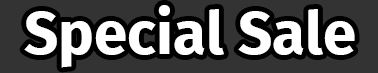
<style>
.page{position:relative;width:378px;height:73px;background:#333333}
.page>*{position:absolute;margin:0}
.t1{font:60px "FiraSans-Bold";color:#ffffff}
</style>
<div class="page">
<p class="t1" style="left:24px;top:5px;width:331px;height:63px">Special Sale</p>
</div>
